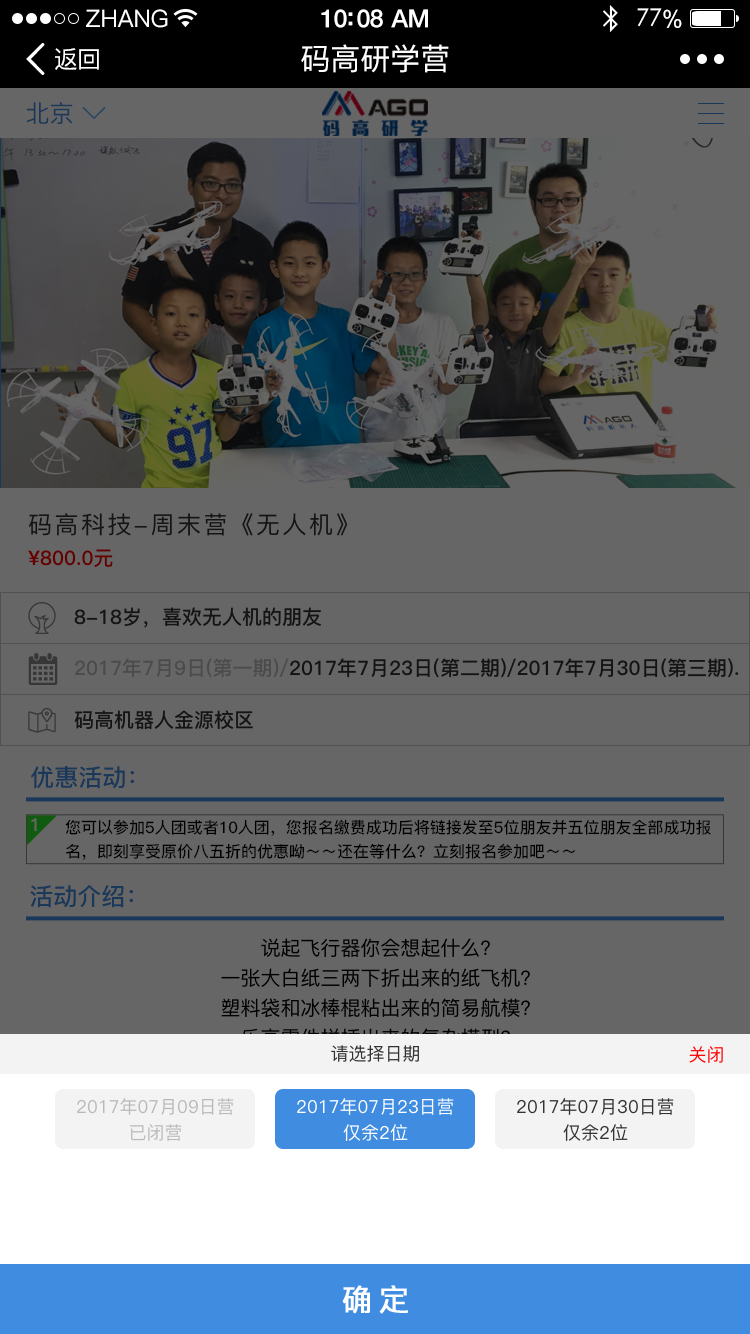
<style>
.page{position:relative;width:750px;height:1334px;background:#666666}
.page>*{position:absolute;margin:0}
.t1{font:24px "PingFang-SC-Medium";color:#ffffff}
.t2{font:25px "HelveticaNeue-Medium";letter-spacing:-0.02em;color:#ffffff}
.t3{font:24px "STXihei";letter-spacing:-0.02em;color:#ffffff}
.t4{font:24px "ArialUnicodeMS";letter-spacing:-0.02em;color:#ffffff}
.t5{font:24px "PingFang-SC-Medium";letter-spacing:-0.02em;color:#ffffff}
.t6{font:30px "PingFang-SC-Medium";color:#ffffff}
.t7{font:24px "PingFang-SC-Medium";color:#1a385a}
.t8{font:24px/31.7px "PingFang-SC-Medium";letter-spacing:0.1em;color:#141414}
.t9{font:20px/32px "PingFang-SC-Bold";color:#141414}
.t10{font:20px "PingFang-SC-Bold";color:#141414}
.t11{font:20px "PingFang-SC-Bold"}
.t12{font:23.9px "PingFang-SC-Bold";color:#1a385a}
.t13{font:17.9px "PingFang-SC-Bold";color:#666666}
.t14{font:16px/23.9px "PingFang-SC-Bold";color:#000000}
.t15{font:20px/30px "PingFang-SC-Medium";color:#000000}
.t16{font:18px "PingFang-SC-Medium";color:#333333}
.t17{font:18px "PingFang-SC-Medium";color:#ff0000}
.t18{font:18px/25.6px "PingFang-SC-Medium";color:#b9b9b9}
.t19{font:18px/25.6px "PingFang-SC-Medium";color:#ffffff}
.t20{font:18px/25.6px "PingFang-SC-Medium";color:#333333}
.t21{font:30px "PingFang-SC-Medium";letter-spacing:0.2em;color:#ffffff;font-weight:bold}
</style>
<div class="page">
<p class="t1" style="left:86px;top:9px;width:82px;height:19px">ZHANG</p>
<p class="t2" style="left:321px;top:9px;width:107px;height:19px">10:08 AM</p>
<p class="t3" style="left:637px;top:8px;width:45px;height:20px">77<span class="t4">%</span></p>
<p class="t5" style="left:55px;top:48px;width:44px;height:22px">返回</p>
<p class="t6" style="left:301px;top:44px;width:148px;height:29px">码高研学营</p>
<p class="t7" style="left:26px;top:102px;width:47px;height:22px">北京</p>
<p class="t8" style="left:28px;top:513px;width:320px;height:54px">码高科技-周末营《无人机》<br><span class="t9">¥800.0元</span></p>
<p class="t10" style="left:74px;top:607px;width:247px;height:21px">8-18岁，喜欢无人机的朋友</p>
<p class="t11" style="left:75px;top:658px;width:664px;height:20px">2017年7月9日(第一期)/2017年7月23日(第二期)/2017年7月30日(第三期).</p>
<p class="t10" style="left:74px;top:710px;width:179px;height:20px">码高机器人金源校区</p>
<p class="t12" style="left:31px;top:766px;width:103px;height:23px">优惠活动：</p>
<p class="t13" style="left:31px;top:818px;width:6px;height:14px">1</p>
<p class="t14" style="left:65px;top:819px;width:646px;height:41px;text-align:justify">您可以参加5人团或者10人团，您报名缴费成功后将链接发至5位朋友并五位朋友全部成功报<br>名，即刻享受原价八五折的优惠呦～～还在等什么？立刻报名参加吧～～</p>
<p class="t12" style="left:30px;top:885px;width:103px;height:23px">活动介绍：</p>
<p class="t15" style="left:221px;top:938px;width:309px;height:138px;text-align:center">说起飞行器你会想起什么？<br>一张大白纸三两下折出来的纸飞机？<br>塑料袋和冰棒棍粘出来的简易航模？<br>乐高零件拼插出来的复杂模型？<br>low  low  low</p>
<p class="t16" style="left:331px;top:1045px;width:88px;height:17px">请选择日期</p>
<p class="t17" style="left:689px;top:1046px;width:34px;height:17px">关闭</p>
<p class="t18" style="left:77px;top:1098px;width:157px;height:43px;text-align:center">2017年07月09日营<br>已闭营</p>
<p class="t19" style="left:297px;top:1098px;width:157px;height:43px;text-align:center">2017年07月23日营<br>仅余2位</p>
<p class="t20" style="left:517px;top:1098px;width:157px;height:43px;text-align:center">2017年07月30日营<br>仅余2位</p>
<p class="t21" style="left:342px;top:1285px;width:66px;height:29px">确定</p>
</div>
